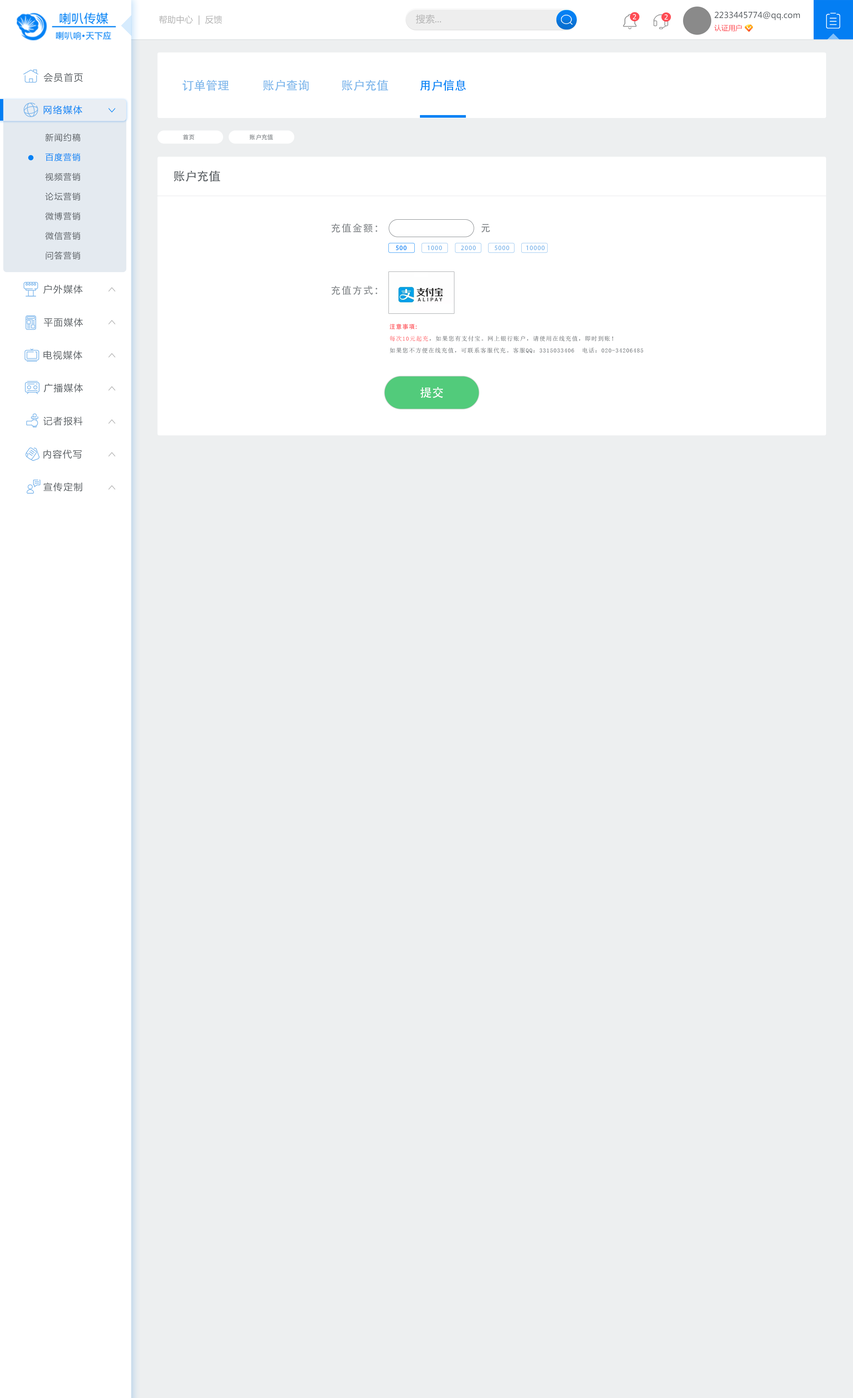
<style>
.page{position:relative;width:853px;height:1398px;background:#edeff0}
.page>*{position:absolute;margin:0}
.t1{font:8.6px "MicrosoftYaHei";color:#b4b4b4}
.t2{font:9.4px "MicrosoftYaHei";color:#b4b4b4}
.t3{font:6.9px "Tahoma";letter-spacing:0.1em;color:#ffffff;text-transform:uppercase}
.t4{font:8.2px/12.3px "MicrosoftYaHei";color:#5c6165}
.t5{font:7.1px/12.3px "MicrosoftYaHei";color:#fe4d55}
.t6{font:9.2px "MicrosoftYaHei";letter-spacing:0.1em;color:#5c6165}
.t7{font:11.8px "AdobeHeitiStd-Regular";color:#7db6eb}
.t8{font:11.8px "AdobeHeitiStd-Regular";color:#0582f5}
.t9{font:9.2px "MicrosoftYaHei";letter-spacing:0.1em;color:#0582f5}
.t10{font:8.2px/19.7px "MicrosoftYaHei";letter-spacing:0.1em;color:#5c6165}
.t11{font:8.2px/19.7px "MicrosoftYaHei";letter-spacing:0.1em;color:#0381f5}
.t12{font:5.9px "AdobeHeitiStd-Regular";color:#878b8e}
.t13{font:11.8px "AdobeHeitiStd-Regular";color:#5c6165}
.t14{font:9.8px "AdobeHeitiStd-Regular";letter-spacing:0.1em;color:#878b8e}
.t15{font:5.9px "AdobeHeitiStd-Regular";letter-spacing:0.1em;color:#0582f5}
.t16{font:5.9px "AdobeHeitiStd-Regular";letter-spacing:0.1em;color:#7db6eb}
.t17{font:5.9px/11.8px "SimSun";letter-spacing:0.1em;color:#5c6165}
.t18{font:5.9px/11.8px "AdobeHeitiStd-Regular";letter-spacing:0.1em;color:#fe4d55}
.t19{font:5.9px/11.8px "SimSun";letter-spacing:0.1em;color:#fe4d55}
.t20{font:11.8px "AdobeHeitiStd-Regular";color:#fefefe}
</style>
<div class="page">
<p class="t1" style="left:159px;top:15px;width:63px;height:10px">帮助中心  |  反馈</p>
<p class="t2" style="left:416px;top:14px;width:25px;height:10px">搜索...</p>
<p class="t3" style="left:633px;top:14px;width:3px;height:5px">2</p>
<p class="t3" style="left:664px;top:14px;width:4px;height:6px">2</p>
<p class="t4" style="left:714px;top:11px;width:86px;height:20px">2233445774@qq.com<br><span class="t5">认证用户</span></p>
<p class="t6" style="left:44px;top:73px;width:39px;height:9px">会员首页</p>
<p class="t7" style="left:182px;top:80px;width:47px;height:11px">订单管理</p>
<p class="t7" style="left:263px;top:80px;width:46px;height:11px">账户查询</p>
<p class="t7" style="left:341px;top:80px;width:47px;height:11px">账户充值</p>
<p class="t8" style="left:420px;top:80px;width:46px;height:11px">用户信息</p>
<p class="t9" style="left:44px;top:105px;width:38px;height:9px">网络媒体</p>
<p class="t10" style="left:45px;top:133px;width:35px;height:127px">新闻约稿<br><span class="t11">百度营销<br></span>视频营销<br>论坛营销<br>微博营销<br>微信营销<br>问答营销</p>
<p class="t12" style="left:183px;top:134px;width:11px;height:6px">首页</p>
<p class="t12" style="left:249px;top:134px;width:24px;height:6px">账户充值</p>
<p class="t13" style="left:173px;top:171px;width:47px;height:11px">账户充值</p>
<p class="t14" style="left:331px;top:223px;width:46px;height:10px">充值金额：</p>
<p class="t14" style="left:481px;top:224px;width:9px;height:9px">元</p>
<p class="t15" style="left:396px;top:246px;width:10px;height:4px">500</p>
<p class="t16" style="left:427px;top:246px;width:15px;height:4px">1000</p>
<p class="t16" style="left:461px;top:246px;width:15px;height:4px">2000</p>
<p class="t16" style="left:494px;top:246px;width:15px;height:4px">5000</p>
<p class="t16" style="left:526px;top:246px;width:18px;height:4px">10000</p>
<p class="t6" style="left:43px;top:285px;width:40px;height:9px">户外媒体</p>
<p class="t14" style="left:331px;top:286px;width:46px;height:9px">充值方式：</p>
<p class="t6" style="left:44px;top:318px;width:39px;height:9px">平面媒体</p>
<p class="t17" style="left:389px;top:324px;width:254px;height:29px"><span class="t18">注意事项:<br></span><span class="t19">每次10元起充</span>，如果您有支付宝。网上银行账户，请使用在线充值，即时到账！<br>如果您不方便在线充值，可联系客服代充。客服QQ：3315033406  电话：020-34206485</p>
<p class="t6" style="left:43px;top:351px;width:39px;height:9px">电视媒体</p>
<p class="t6" style="left:44px;top:383px;width:39px;height:10px">广播媒体</p>
<p class="t20" style="left:420px;top:387px;width:23px;height:11px">提交</p>
<p class="t6" style="left:43px;top:417px;width:40px;height:9px">记者报料</p>
<p class="t6" style="left:43px;top:450px;width:39px;height:9px">内容代写</p>
<p class="t6" style="left:43px;top:482px;width:39px;height:10px">宣传定制</p>
</div>
